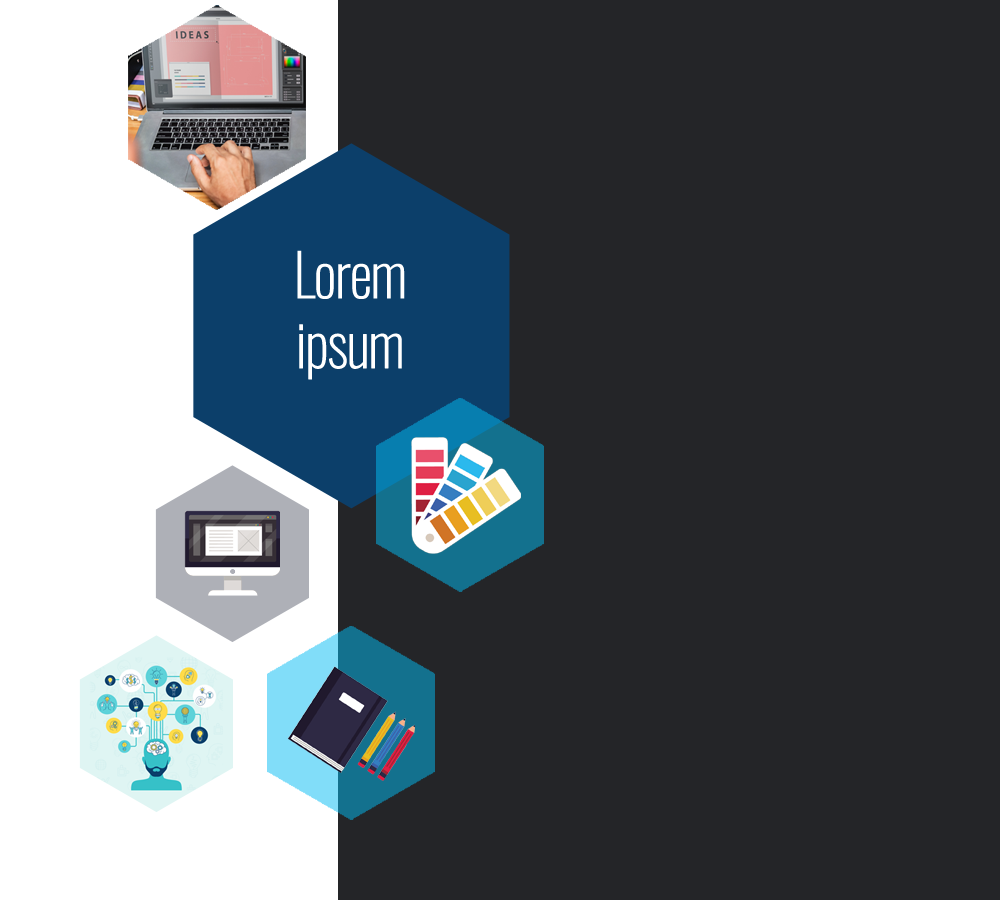
<style>
.page{position:relative;width:1000px;height:900px;background:#242528}
.page>*{position:absolute;margin:0}
.t1{font:58.2px "Oswald-ExtraLight";letter-spacing:-0.05em;color:#ffffff;font-weight:bold}
</style>
<div class="page">
<p class="t1" style="left:297px;top:250px;width:108px;height:130px;text-align:center">Lorem ipsum</p>
</div>
